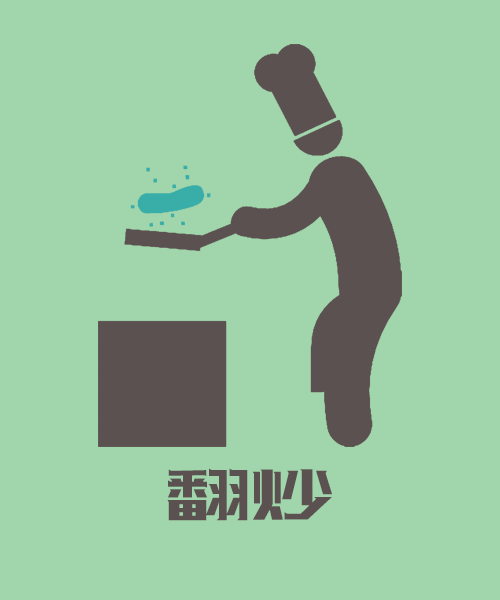
<style>
.page{position:relative;width:500px;height:600px;background:#a1d5ab}
.page>*{position:absolute;margin:0}
.t1{font:84.7px "HuXiaoBoKuHei";color:#5b5151}
</style>
<div class="page">
<p class="t1" style="left:167px;top:468px;width:165px;height:53px">翻炒</p>
</div>
